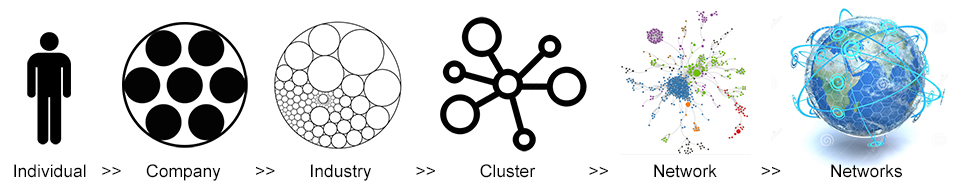
<style>
.page{position:relative;width:960px;height:190px;background:#ffffff}
.page>*{position:absolute;margin:0}
.t1{font:17.5px "ArialMT";color:#000000}
</style>
<div class="page">
<p class="t1" style="left:14px;top:164px;width:888px;height:17px">Individual   &gt;&gt;     Company       &gt;&gt;       Industry         &gt;&gt;         Cluster           &gt;&gt;         Network         &gt;&gt;          Networks</p>
</div>
